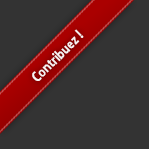
<style>
.page{position:relative;width:149px;height:149px;background:#333333}
.page>*{position:absolute;margin:0}
.t1{font:16px "Collegiate";color:#ffffff}
</style>
<div class="page">
<p class="t1" style="left:32px;top:29px;width:52px;height:52px;rotate:-45deg">Contribuez !</p>
</div>
